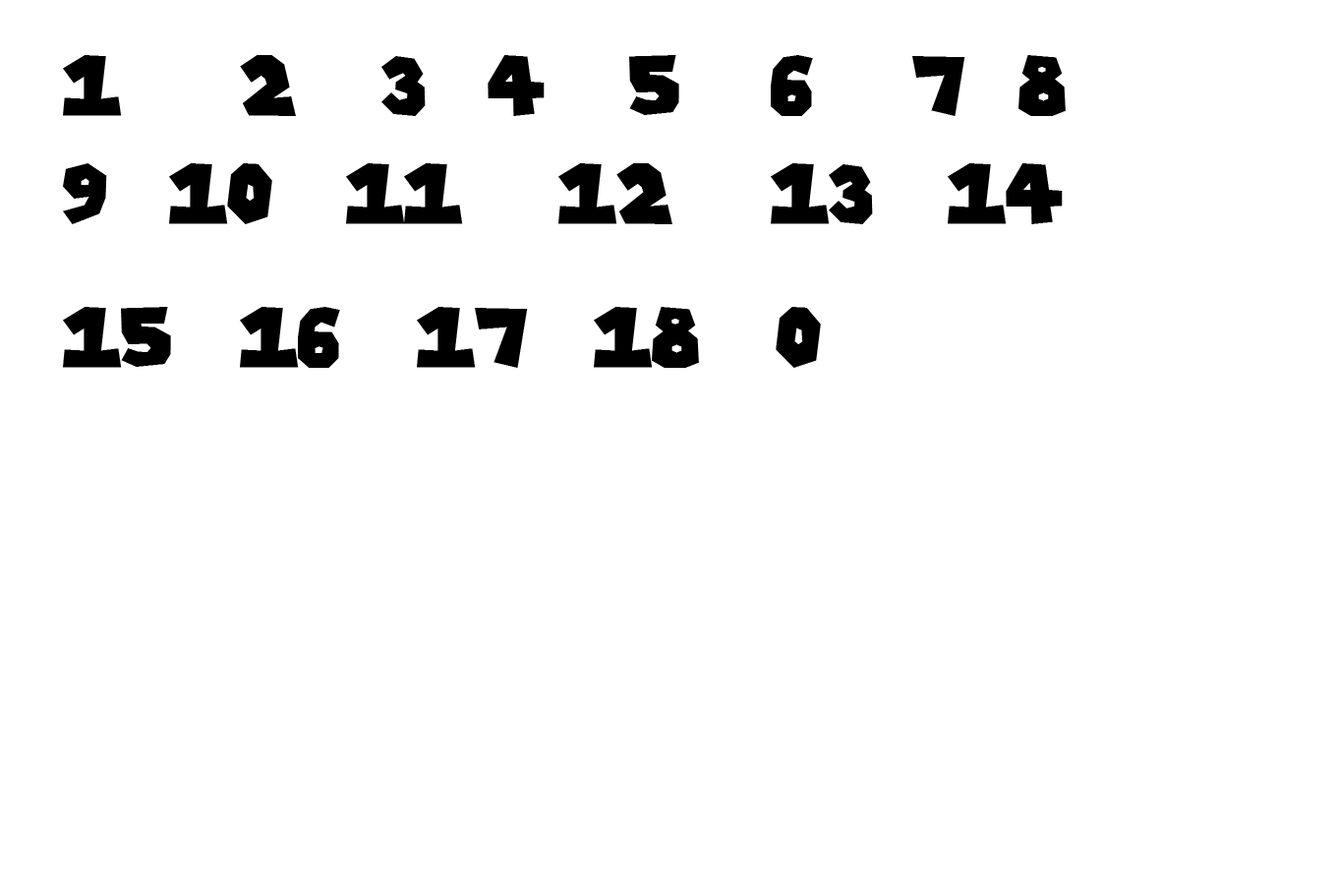
<style>
.page{position:relative;width:1335px;height:893px;background:#ffffff}
.page>*{position:absolute;margin:0}
.t1{font:82px/35.9px "SuperMarioGalaxy";color:#000000}
</style>
<div class="page">
<p class="t1" style="left:63px;top:55px;width:1003px;height:313px">1    2   3  4   5   6   7  8 <br><br><br>9  10   11   12   13  14<br><br><br><br>15  16  17  18  0</p>
</div>
